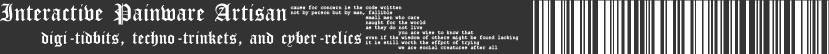
<style>
.page{position:relative;width:829px;height:54px;background:#333333}
.page>*{position:absolute;margin:0}
.t1{font:25.6px "CloisterBlack-Light";color:#ffffff}
.t2{font:5px/5px "CourierNewPSMT";color:#ffffff}
.t3{font:19px "CloisterBlack-Light";color:#ffffff}
</style>
<div class="page">
<p class="t1" style="left:0px;top:3px;width:287px;height:22px">Interactive Painware Artisan</p>
<p class="t2" style="left:290px;top:5px;width:229px;height:45px">cause for concern is the code written<br>not by person but by man, fallible<br>   small men who care<br>   naught for the world<br>   as they do not live<br>   you are wise to know that<br>   even if the wisdom of others might be found lacking<br>   it is still worth the effprt of trying<br>   we are social creatures after all</p>
<p class="t3" style="left:41px;top:31px;width:321px;height:16px">digi-tidbits, techno-trinkets, and cyber-relics</p>
</div>
